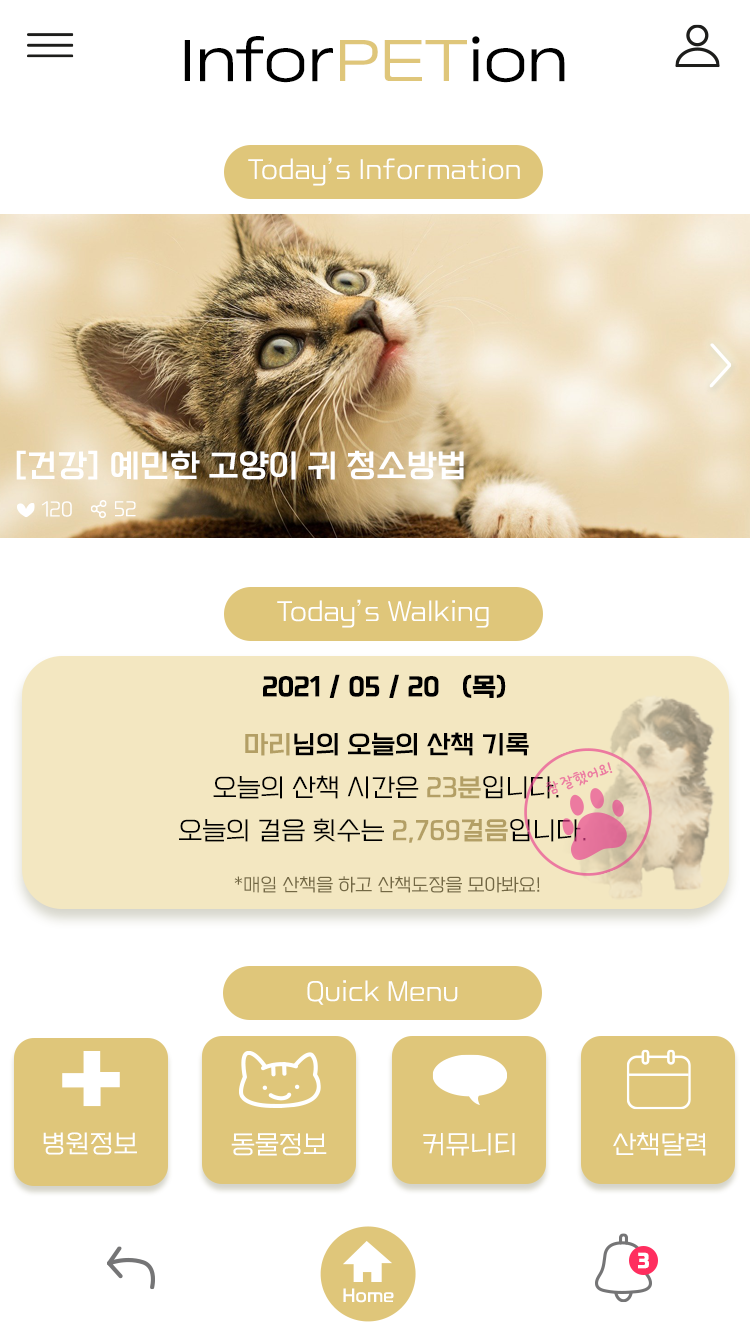
<style>
.page{position:relative;width:750px;height:1334px;background:#ffffff}
.page>*{position:absolute;margin:0}
.t1{font:60px "RixGwangalliM";color:#000000}
.t2{font:60px "RixGwangalliM";color:#dfc67a}
.t3{font:24px "RixSeoulStationL";color:#ffffff}
.t4{font:30px "RixSeoulStationM";color:#ffffff}
.t5{font:18px "RixSeoulStationL";color:#ffffff}
.t6{font:24px "RixSeoulStationB";color:#000000}
.t7{font:24px/43px "RixSeoulStationL";color:#000000}
.t8{font:24px/43px "RixSeoulStationM";color:#b39f65}
.t9{font:24px/43px "RixSeoulStationM";color:#000000}
.t10{font:17px "RixSeoulStationL";color:#736844}
.t11{font:18px "RixSeoulStationH";color:#ffffff}
.t12{font:16.2px "RixSeoulStationM";color:#ffffff}
</style>
<div class="page">
<p class="t1" style="left:184px;top:36px;width:381px;height:47px">Infor<span class="t2">PET</span>ion</p>
<p class="t3" style="left:248px;top:157px;width:272px;height:29px">Today’s Information</p>
<p class="t4" style="left:16px;top:450px;width:448px;height:30px">[건강] 예민한 고양이 귀 청소방법</p>
<p class="t5" style="left:41px;top:501px;width:31px;height:16px">120</p>
<p class="t5" style="left:115px;top:501px;width:21px;height:16px">52</p>
<p class="t3" style="left:277px;top:599px;width:212px;height:29px">Today’s Walking</p>
<p class="t6" style="left:263px;top:674px;width:243px;height:24px">2021 / 05 / 20   (목)</p>
<p class="t7" style="left:179px;top:732px;width:407px;height:111px;text-align:center"><span class="t8">마리</span><span class="t9">님의 오늘의 산책 기록<br></span>오늘의 산책 시간은 <span class="t8">23분</span>입니다.<br>오늘의 걸음 횟수는 <span class="t8">2,769걸음</span>입니다.</p>
<p class="t10" style="left:234px;top:876px;width:306px;height:17px">*매일 산책을 하고 산책도장을 모아봐요!</p>
<p class="t3" style="left:307px;top:980px;width:151px;height:25px">Quick Menu</p>
<p class="t3" style="left:43px;top:1132px;width:94px;height:23px">병원정보</p>
<p class="t3" style="left:231px;top:1133px;width:96px;height:23px">동물정보</p>
<p class="t3" style="left:423px;top:1133px;width:92px;height:23px">커뮤니티</p>
<p class="t3" style="left:613px;top:1132px;width:93px;height:24px">산책달력</p>
<p class="t11" style="left:638px;top:1252px;width:11px;height:17px">3</p>
<p class="t12" style="left:343px;top:1288px;width:51px;height:15px">Home</p>
</div>
